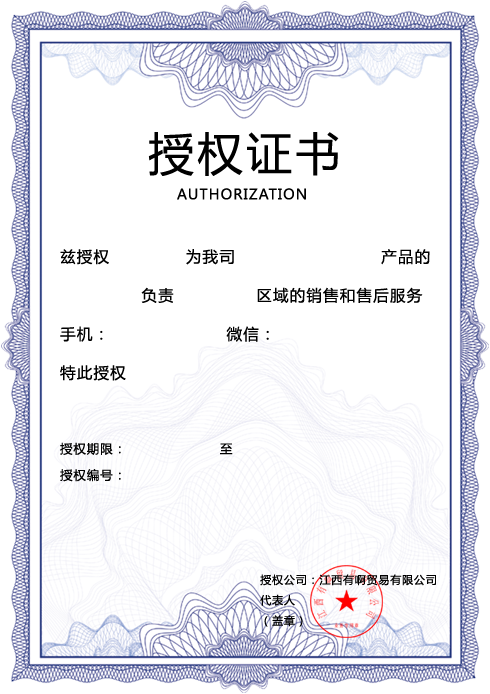
<style>
.page{position:relative;width:490px;height:694px;background:#ffffff}
.page>*{position:absolute;margin:0}
.t1{font:45.4px "MicrosoftYaHei";letter-spacing:0.08em;color:#000000}
.t2{font:14.1px "MicrosoftYaHei";letter-spacing:0.08em;color:#000000}
.t3{font:15.5px/38.7px "MicrosoftYaHei";letter-spacing:0.08em;color:#000000}
.t4{font:12.4px/26.3px "MicrosoftYaHei";letter-spacing:0.08em;color:#000000}
.t5{font:10.9px/20.4px "MicrosoftYaHei";letter-spacing:0.08em;color:#000000}
</style>
<div class="page">
<p class="t1" style="left:148px;top:132px;width:191px;height:44px">授权证书</p>
<p class="t2" style="left:177px;top:188px;width:129px;height:12px">AUTHORIZATION</p>
<p class="t3" style="left:60px;top:249px;width:370px;height:233px">兹授权             为我司                         产品的<br>              负责              区域的销售和售后服务<br>手机：                    微信：<br>特此授权<br><br><span class="t4">授权期限：                    至<br>授权编号：</span></p>
<p class="t5" style="left:260px;top:574px;width:176px;height:53px">授权公司：江西有啊贸易有限公司<br>代表人<br>（盖章）</p>
</div>
